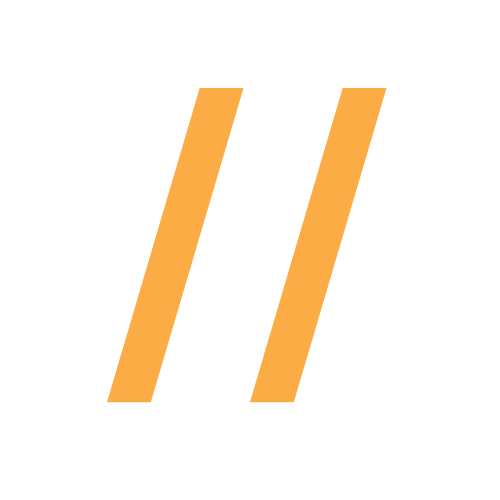
<style>
.page{position:relative;width:500px;height:500px;background:#ffffff}
.page>*{position:absolute;margin:0}
.t1{font:433.3px "MyriadPro-Bold";color:#fcac45}
</style>
<div class="page">
<p class="t1" style="left:107px;top:88px;width:280px;height:315px">//</p>
</div>
